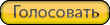
<style>
.page{position:relative;width:110px;height:25px}
.page>*{position:absolute;margin:0}
.t1{font:18px "MyriadPro-Regular";color:#555552}
</style>
<div class="page">
<p class="t1" style="left:14px;top:5px;width:85px;height:13px">Голосовать</p>
</div>
